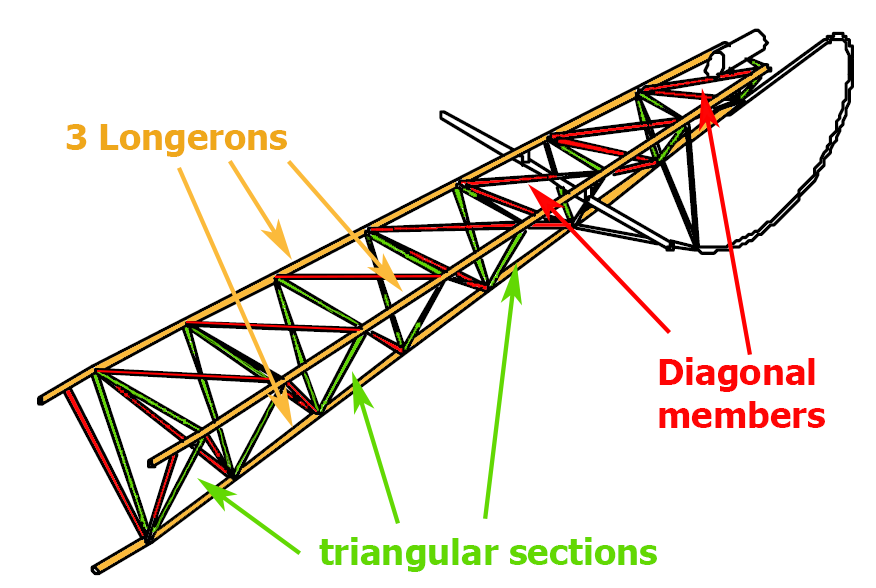
<style>
.page{position:relative;width:876px;height:588px;background:#ffffff}
.page>*{position:absolute;margin:0}
.t1{font:36px "Tahoma-Bold";color:#efa71b}
.t2{font:36px "Tahoma-Bold";color:#fe0505}
.t3{font:36px "Tahoma-Bold";color:#62d803}
</style>
<div class="page">
<p class="t1" style="left:66px;top:124px;width:221px;height:33px">3 Longerons</p>
<p class="t2" style="left:659px;top:357px;width:166px;height:71px">Diagonal<br>members</p>
<p class="t3" style="left:319px;top:537px;width:338px;height:35px">triangular sections</p>
</div>
